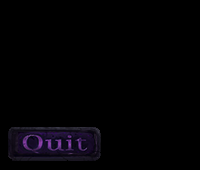
<style>
.page{position:relative;width:200px;height:170px;background:#000000}
.page>*{position:absolute;margin:0}
.t1{font:23.7px "Caladea-Regular";scale:1.59 1}
</style>
<div class="page">
<p class="t1" style="left:23px;top:134px;width:67px;height:21px">Quit</p>
<p class="t1" style="left:23px;top:134px;width:67px;height:21px">Quit</p>
</div>
